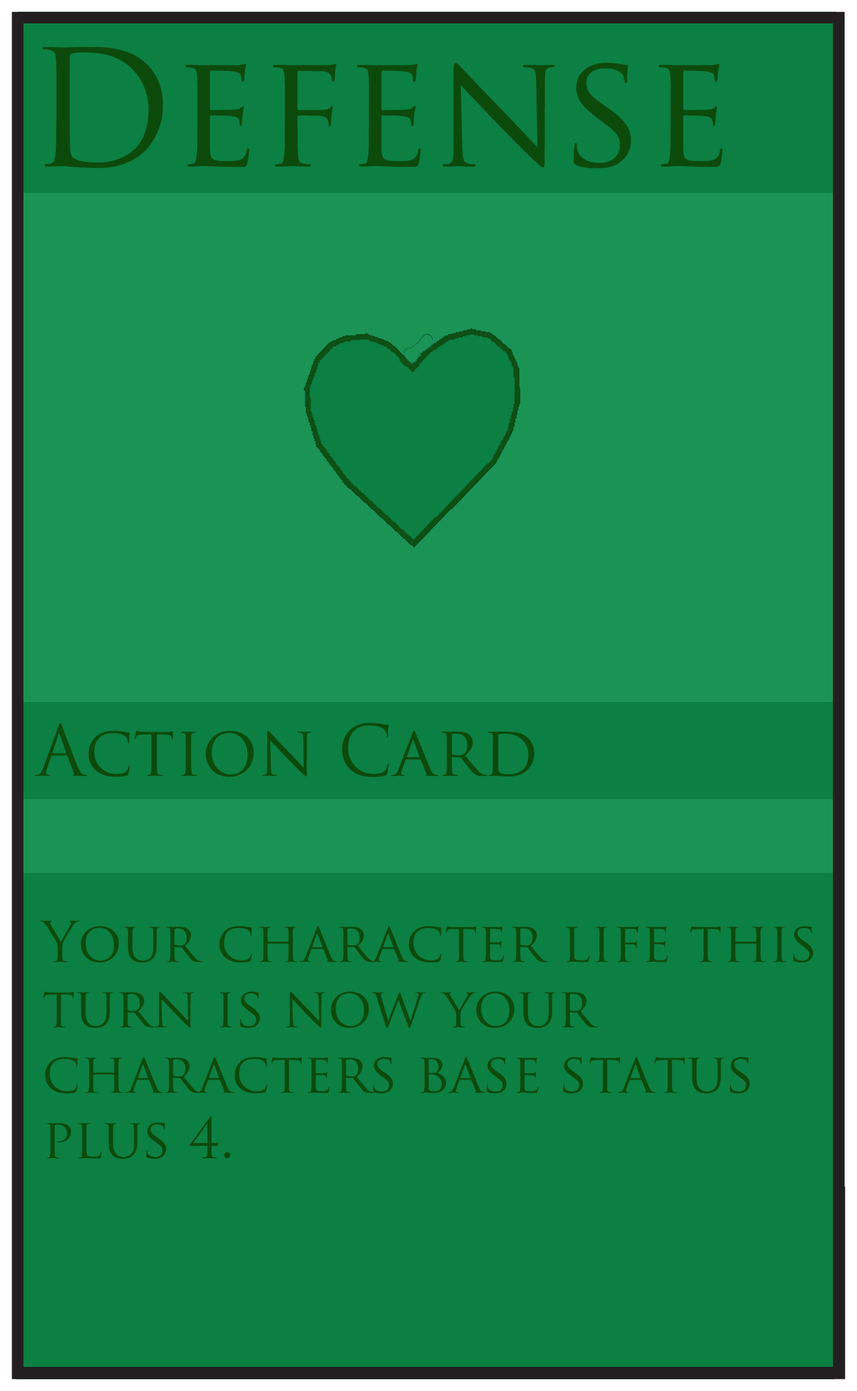
<style>
.page{position:relative;width:857px;height:1391px;background:#0c7f42}
.page>*{position:absolute;margin:0}
.t1{font:157.9px "TrajanPro-Regular";color:#0c4a0c}
.t2{font:68.9px "TrajanPro-Regular";color:#0c4a0c}
.t3{font:54.5px "TrajanPro-Regular";color:#0c4a0c}
</style>
<div class="page">
<p class="t1" style="left:42px;top:47px;width:681px;height:122px">Defense</p>
<p class="t2" style="left:34px;top:723px;width:501px;height:54px">Action Card</p>
<p class="t3" style="left:40px;top:921px;width:774px;height:238px">Your character life this<br>turn is now your <br>characters base status <br>plus 4.</p>
</div>
